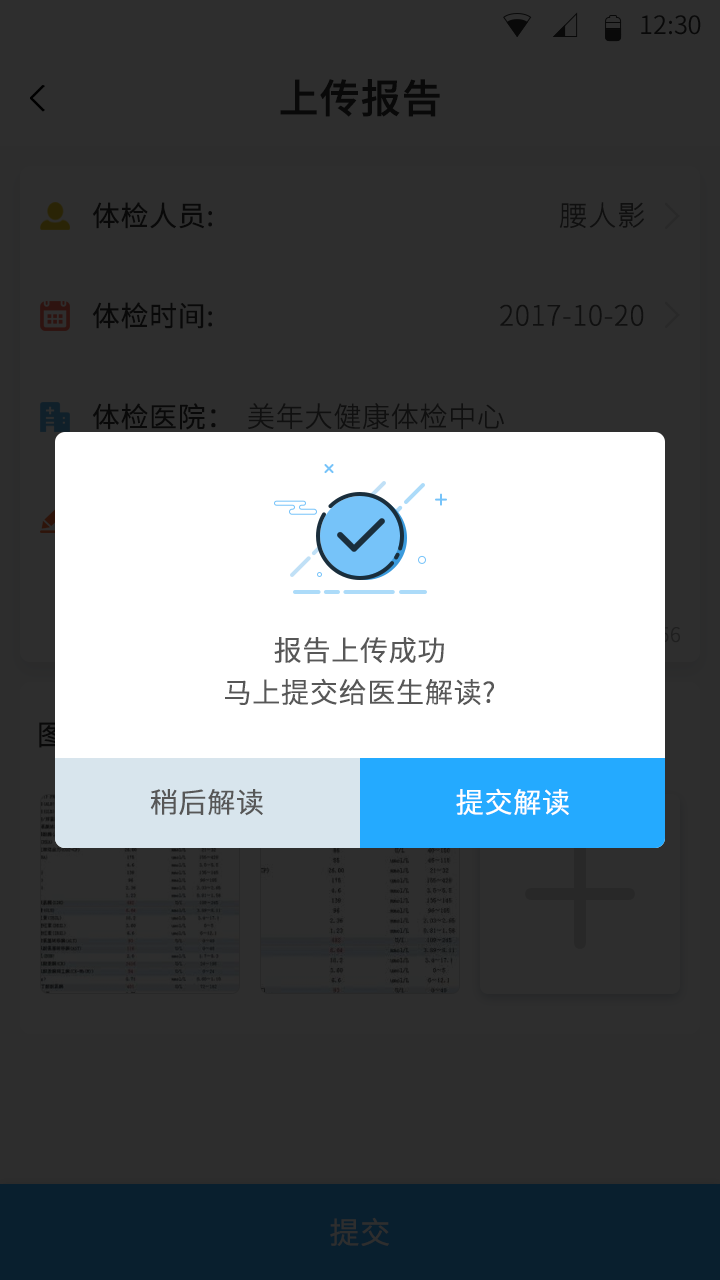
<style>
.page{position:relative;width:720px;height:1280px;background:#2e2e2e}
.page>*{position:absolute;margin:0}
.t1{font:25.4px "SourceHanSansCN-Normal";color:#090909}
.t2{font:40px "SourceHanSansCN-Medium";color:#090909;font-weight:bold}
.t3{font:28px "SourceHanSansCN-Normal";color:#090909;font-weight:bold}
.t4{font:28px "SourceHanSansCN-Light";color:#101010;font-weight:bold}
.t5{font:28px/42px "SourceHanSansCN-Normal";color:#575757;font-weight:bold}
.t6{font:28px "SourceHanSansCN-Normal";color:#575757;font-weight:bold}
.t7{font:28px "SourceHanSansCN-Normal";color:#ffffff;font-weight:bold}
.t8{font:30px "SourceHanSansCN-Normal";color:#2e2e2e;font-weight:bold}
</style>
<div class="page">
<p class="t1" style="left:641px;top:15px;width:60px;height:20px">12:30</p>
<p class="t2" style="left:280px;top:79px;width:160px;height:38px">上传报告</p>
<p class="t3" style="left:92px;top:202px;width:120px;height:27px">体检人员:</p>
<p class="t4" style="left:559px;top:202px;width:85px;height:26px">腰人影</p>
<p class="t3" style="left:92px;top:302px;width:120px;height:27px">体检时间:</p>
<p class="t4" style="left:500px;top:304px;width:144px;height:22px">2017-10-20</p>
<p class="t3" style="left:92px;top:403px;width:124px;height:27px">体检医院：</p>
<p class="t4" style="left:248px;top:403px;width:256px;height:27px">美年大健康体检中心</p>
<p class="t5" style="left:225px;top:637px;width:269px;height:69px;text-align:center">报告上传成功<br>马上提交给医生解读?</p>
<p class="t6" style="left:150px;top:789px;width:113px;height:27px">稍后解读</p>
<p class="t7" style="left:456px;top:788px;width:113px;height:28px">提交解读</p>
<p class="t8" style="left:330px;top:1217px;width:59px;height:29px">提交</p>
</div>
